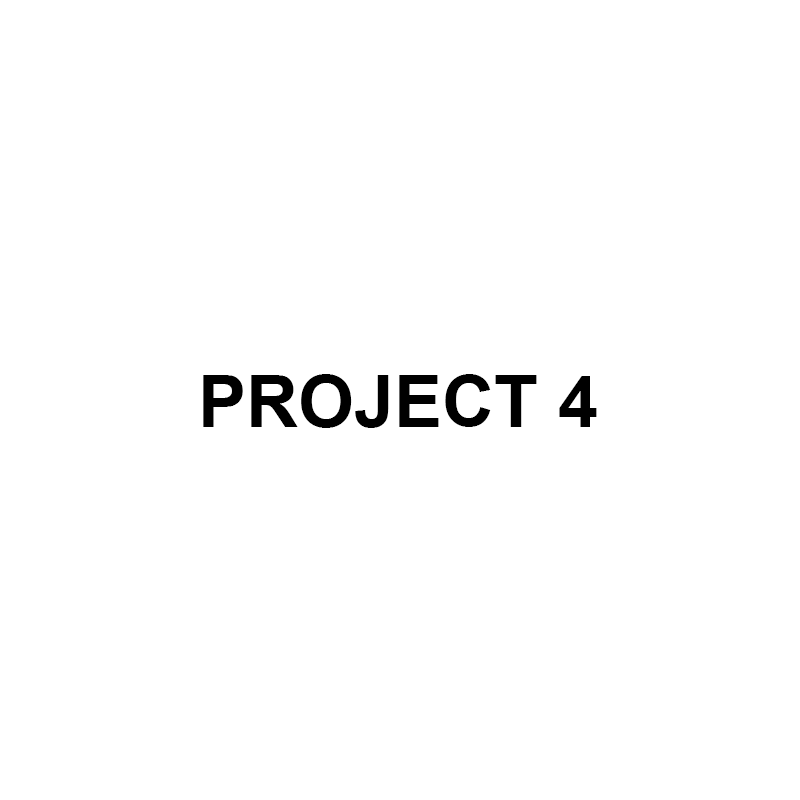
<style>
.page{position:relative;width:800px;height:800px;background:#ffffff}
.page>*{position:absolute;margin:0}
.t1{font:72px "Arial-BoldMT";color:#000000}
</style>
<div class="page">
<p class="t1" style="left:203px;top:374px;width:394px;height:54px">PROJECT 4</p>
</div>
